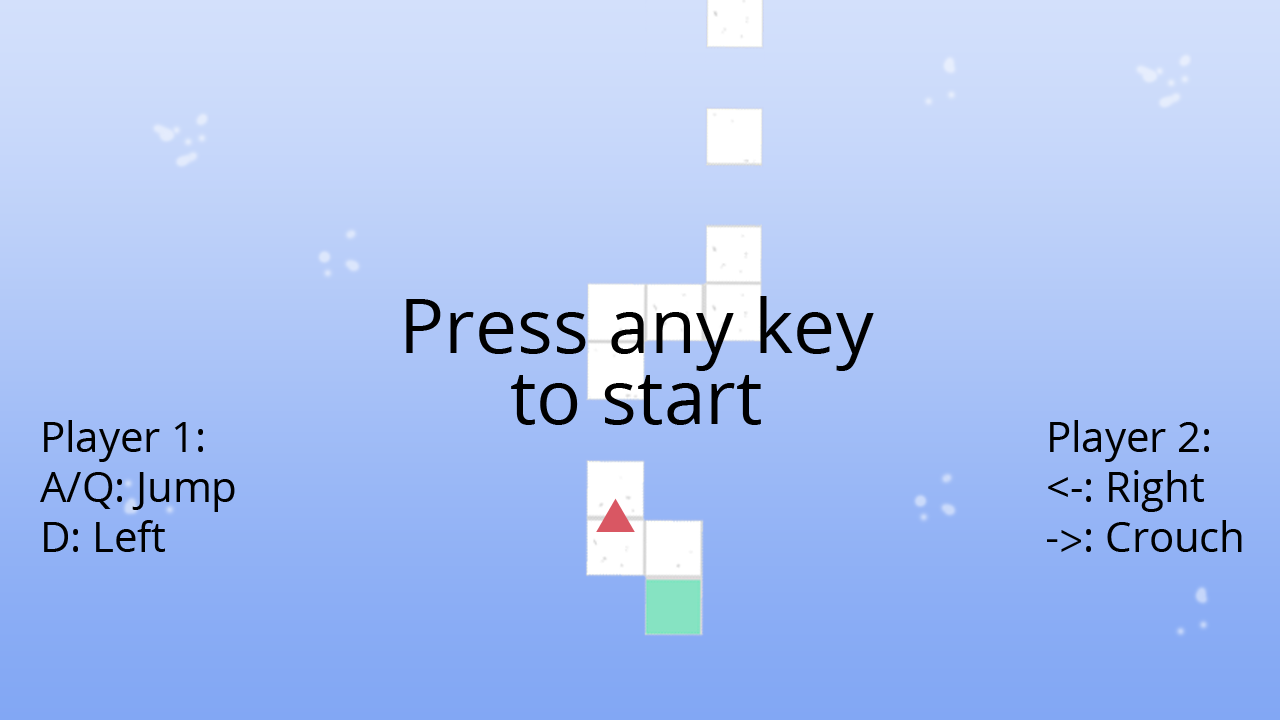
<style>
.page{position:relative;width:1280px;height:720px}
.page>*{position:absolute;margin:0}
.t1{font:75.2px/70.9px "OpenSans";color:#000000}
.t2{font:41.7px "OpenSans";color:#000000}
.t3{font:41.7px "MyriadPro-Regular";color:#000000}
</style>
<div class="page">
<p class="t1" style="left:406px;top:296px;width:468px;height:129px;text-align:center">Press any key<br>to start</p>
<p class="t2" style="left:40px;top:420px;width:195px;height:132px">Player 1:<br>A/Q: Jump<br>D: Left</p>
<p class="t2" style="left:1047px;top:420px;width:195px;height:132px">Player 2:<br>&lt;-: Right<br><span class="t3">-&gt;</span>: Crouch</p>
</div>
